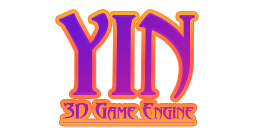
<style>
.page{position:relative;width:256px;height:128px;background:#ffffff}
.page>*{position:absolute;margin:0}
.t1{font:33.8px/11.3px "Abaddon";letter-spacing:-0.01em;font-weight:bold;text-decoration:underline}
.t2{font:101.5px/11.3px "Abaddon";letter-spacing:-0.01em;text-transform:uppercase;font-weight:bold}
</style>
<div class="page">
<p class="t1" style="left:59px;top:13px;width:136px;height:110px;text-align:center"><span class="t2">Yin<br></span>3D Game Engine</p>
</div>
